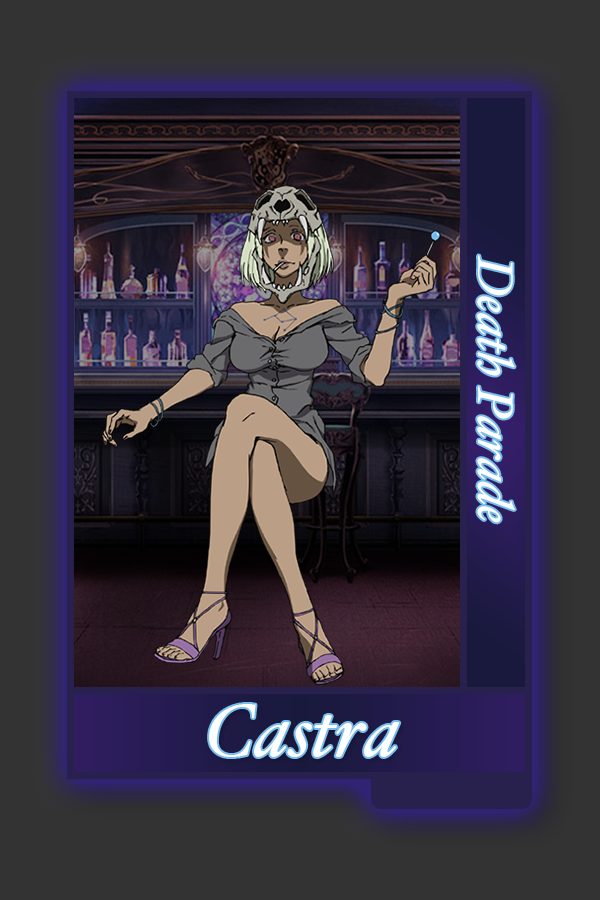
<style>
.page{position:relative;width:600px;height:900px;background:#333333}
.page>*{position:absolute;margin:0}
.t1{font:50px "HoeflerText-Italic";color:#ffffff}
.t2{font:75px "HoeflerText-Italic";color:#ffffff}
</style>
<div class="page">
<p class="t1" style="left:477px;top:255px;width:38px;height:268px;rotate:90deg">Death Parade</p>
<p class="t2" style="left:209px;top:704px;width:191px;height:53px">Castra</p>
</div>
